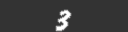
<style>
.page{position:relative;width:128px;height:32px;background:#333333}
.page>*{position:absolute;margin:0}
.t1{font:30.6px "DomDiagonalBT-Bold";scale:1.08 1}
</style>
<div class="page">
<p class="t1" style="left:56px;top:10px;width:15px;height:21px">3</p>
</div>
